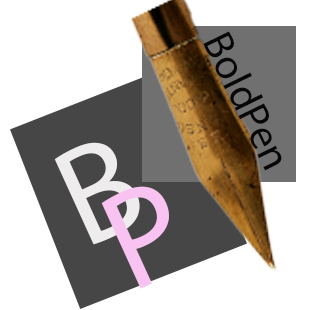
<style>
.page{position:relative;width:310px;height:310px;background:#ffffff}
.page>*{position:absolute;margin:0}
.t1{font:42.3px "MyriadPro-Regular";color:#070707}
.t2{font:141px "MyriadPro-Regular";color:#eeecec}
.t3{font:141px "MyriadPro-Regular";color:#f8c3f1}
</style>
<div class="page">
<p class="t1" style="left:203px;top:31px;width:79px;height:140px;rotate:64deg">BoldPen</p>
<p class="t2" style="left:54px;top:142px;width:86px;height:103px;rotate:-25deg">B</p>
<p class="t3" style="left:101px;top:186px;width:68px;height:103px;rotate:-25deg">P</p>
</div>
